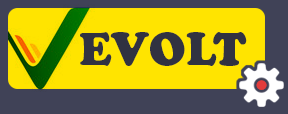
<style>
.page{position:relative;width:288px;height:114px;background:#ffe400}
.page>*{position:absolute;margin:0}
.t1{font:45px "CooperBlackStd";color:#303141}
</style>
<div class="page">
<p class="t1" style="left:80px;top:32px;width:167px;height:34px">EVOLT</p>
</div>
